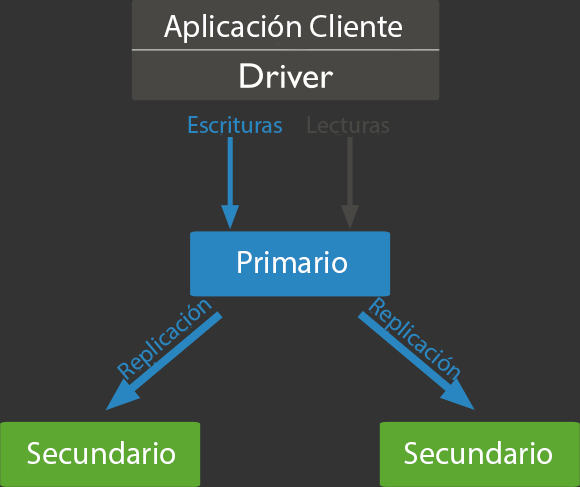
<style>
.page{position:relative;width:580px;height:487px;background:#333333}
.page>*{position:absolute;margin:0}
.t1{font:32px "MyriadPro-Regular";color:#ffffff}
.t2{font:24px "MyriadPro-Regular";color:#2a86c0}
.t3{font:24px "MyriadPro-Regular";color:#484743}
</style>
<div class="page">
<p class="t1" style="left:164px;top:14px;width:238px;height:29px">Aplicación Cliente</p>
<p class="t2" style="left:188px;top:116px;width:94px;height:17px">Escrituras</p>
<p class="t3" style="left:307px;top:116px;width:83px;height:17px">Lecturas</p>
<p class="t1" style="left:238px;top:251px;width:109px;height:22px">Primario</p>
<p class="t2" style="left:117px;top:300px;width:95px;height:80px;rotate:-41deg">Replicación</p>
<p class="t2" style="left:368px;top:297px;width:92px;height:84px;rotate:40deg">Replicación</p>
<p class="t1" style="left:27px;top:441px;width:148px;height:23px">Secundario</p>
<p class="t1" style="left:404px;top:441px;width:148px;height:23px">Secundario</p>
</div>
